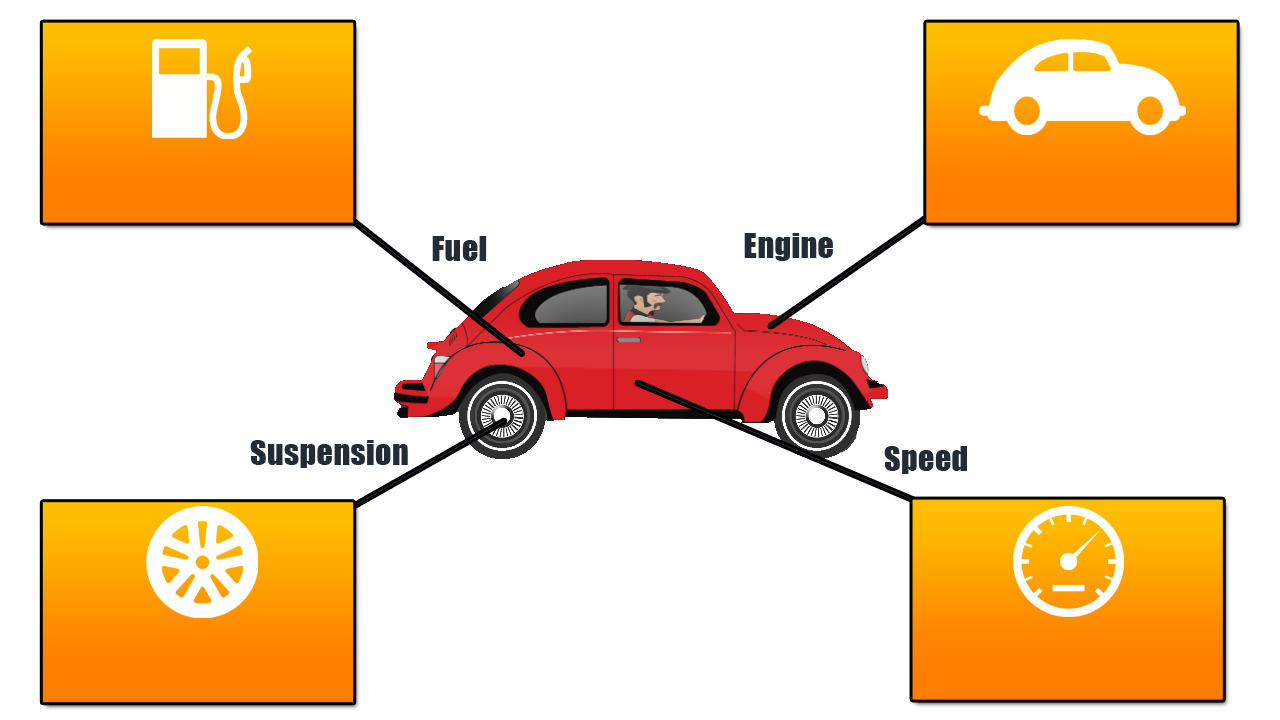
<style>
.page{position:relative;width:1280px;height:720px;background:#ffffff}
.page>*{position:absolute;margin:0}
.t1{font:32px "Impact";letter-spacing:0.012em;color:#222c36}
</style>
<div class="page">
<p class="t1" style="left:744px;top:233px;width:89px;height:28px">Engine</p>
<p class="t1" style="left:432px;top:236px;width:55px;height:25px">Fuel</p>
<p class="t1" style="left:250px;top:440px;width:158px;height:28px">Suspension</p>
<p class="t1" style="left:884px;top:446px;width:83px;height:28px">Speed</p>
</div>
